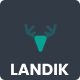
<style>
.page{position:relative;width:80px;height:80px;background:#323a46}
.page>*{position:absolute;margin:0}
.t1{font:16px "Poppins-Bold";color:#ffffff}
</style>
<div class="page">
<p class="t1" style="left:11px;top:63px;width:58px;height:12px">LANDIK</p>
</div>
